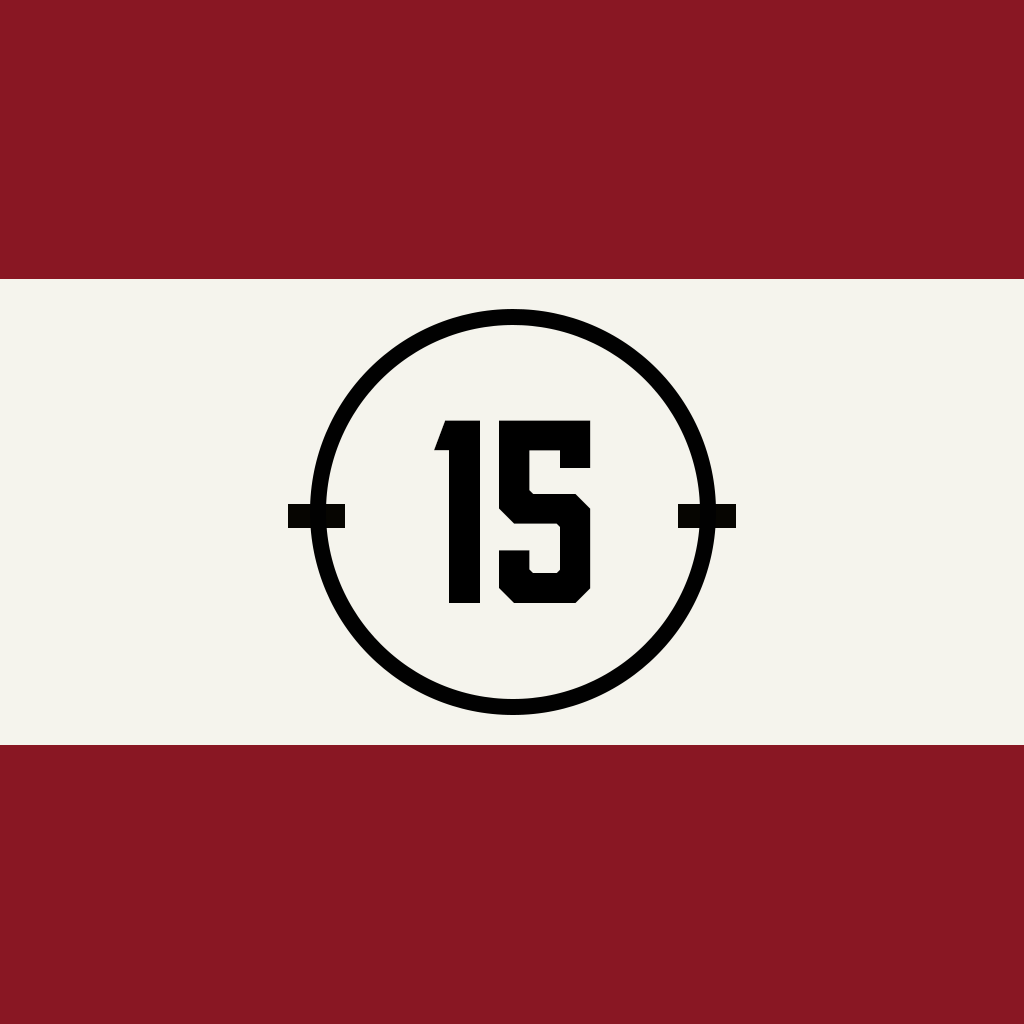
<style>
.page{position:relative;width:1024px;height:1024px;background:#891723}
.page>*{position:absolute;margin:0}
.t1{font:240px "Prohibition-Regular";color:#000000}
</style>
<div class="page">
<p class="t1" style="left:434px;top:420px;width:157px;height:183px">15</p>
</div>
